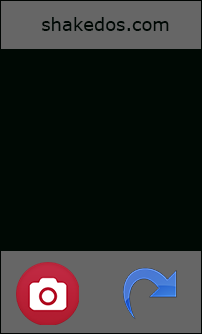
<style>
.page{position:relative;width:202px;height:334px;background:#000904}
.page>*{position:absolute;margin:0}
.t1{font:18px "Verdana";color:#000804}
</style>
<div class="page">
<p class="t1" style="left:42px;top:17px;width:127px;height:14px">shakedos.com</p>
</div>
